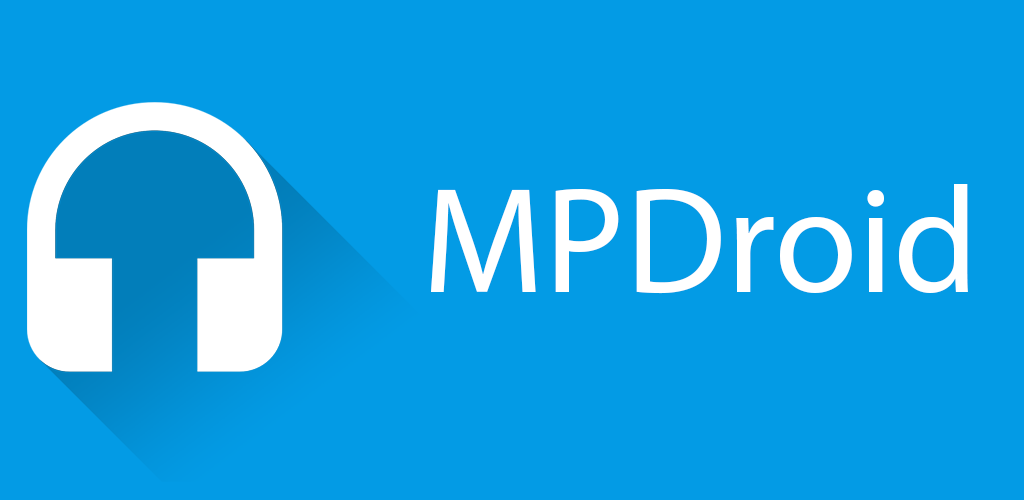
<style>
.page{position:relative;width:1024px;height:500px;background:#039be5}
.page>*{position:absolute;margin:0}
.t1{font:151.9px "MyriadPro-Regular";color:#ffffff}
</style>
<div class="page">
<p class="t1" style="left:431px;top:184px;width:537px;height:110px">MPDroid</p>
</div>
